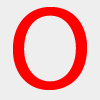
<style>
.page{position:relative;width:100px;height:100px;background:#eeeeee}
.page>*{position:absolute;margin:0}
.t1{font:120px "MyriadPro-Regular";color:#ff0000}
</style>
<div class="page">
<p class="t1" style="left:13px;top:7px;width:74px;height:83px">O</p>
</div>
